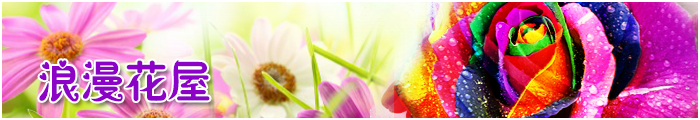
<style>
.page{position:relative;width:700px;height:120px}
.page>*{position:absolute;margin:0}
.t1{font:44.3px "HYy1gj";letter-spacing:-0.02em;color:#8d03c7}
</style>
<div class="page">
<p class="t1" style="left:39px;top:60px;width:171px;height:42px">浪漫花屋</p>
</div>
